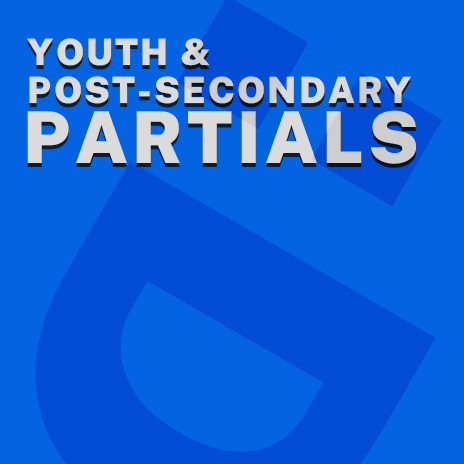
<style>
.page{position:relative;width:464px;height:464px;background:#0463e1}
.page>*{position:absolute;margin:0}
.t1{font:36.2px/40px "PublicSansRoman-Black";letter-spacing:0.06em;color:#dbdbdb}
.t2{font:71.4px/62.8px "PublicSansRoman-Black";letter-spacing:0.06em;color:#dbdbdb}
</style>
<div class="page">
<p class="t1" style="left:27px;top:38px;width:389px;height:126px">YOUTH &amp;<br>POST-SECONDARY<br><span class="t2">PARTIALS</span></p>
</div>
